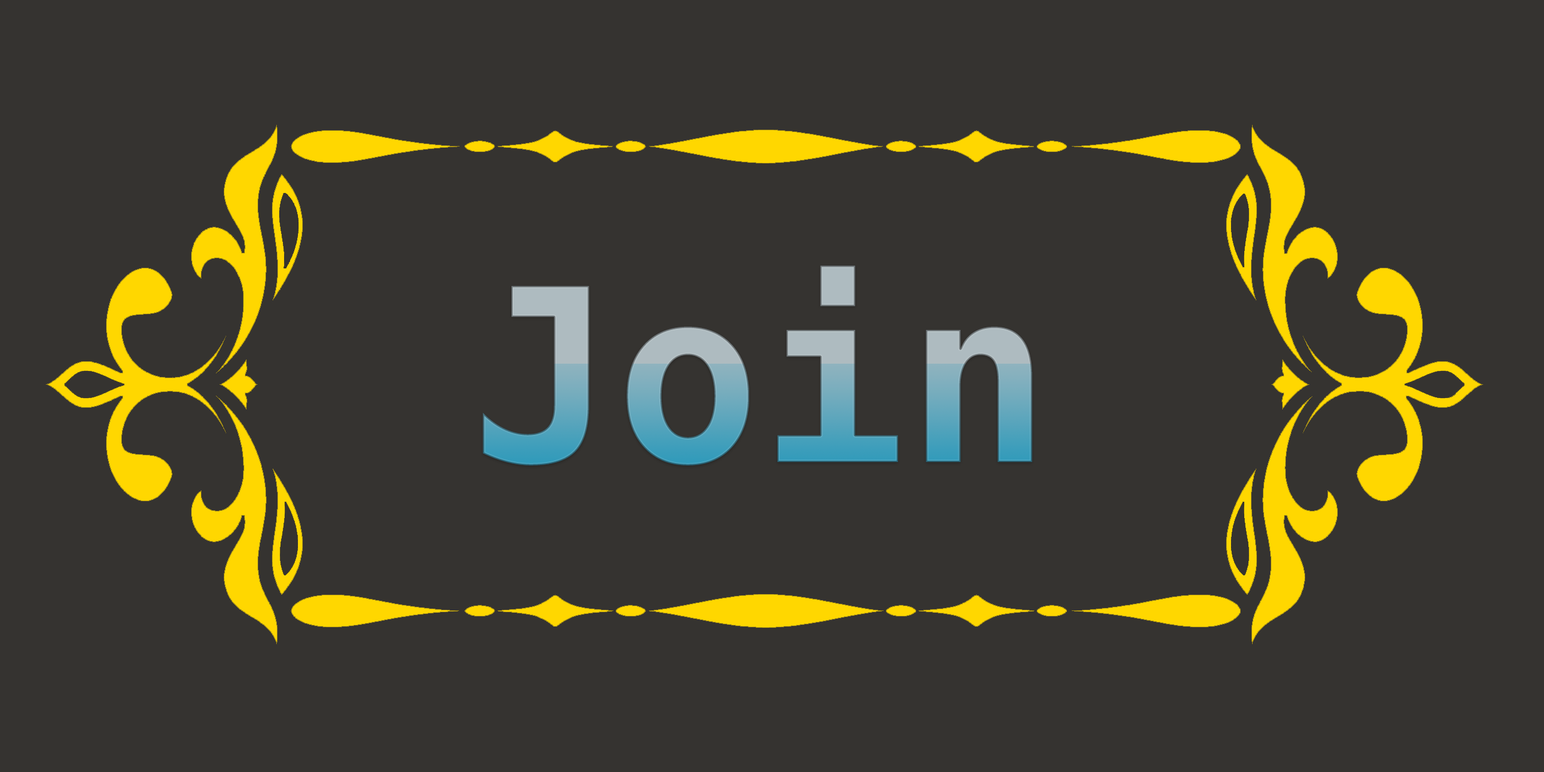
<style>
.page{position:relative;width:1544px;height:772px;background:#353330}
.page>*{position:absolute;margin:0}
.t1{font:241.3px "Menlo-Bold"}
</style>
<div class="page">
<p class="t1" style="left:483px;top:265px;width:550px;height:201px">Join</p>
</div>
